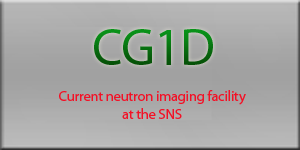
<style>
.page{position:relative;width:300px;height:150px}
.page>*{position:absolute;margin:0}
.t1{font:52.5px "MyriadPro-Regular";letter-spacing:-0.015em}
.t2{font:14.5px/18px "MyriadPro-Regular";letter-spacing:-0.015em;color:#f31126}
</style>
<div class="page">
<p class="t1" style="left:94px;top:29px;width:119px;height:36px">CG1D</p>
<p class="t2" style="left:59px;top:90px;width:187px;height:29px;text-align:center">Current neutron imaging facility<br>at the SNS</p>
</div>
